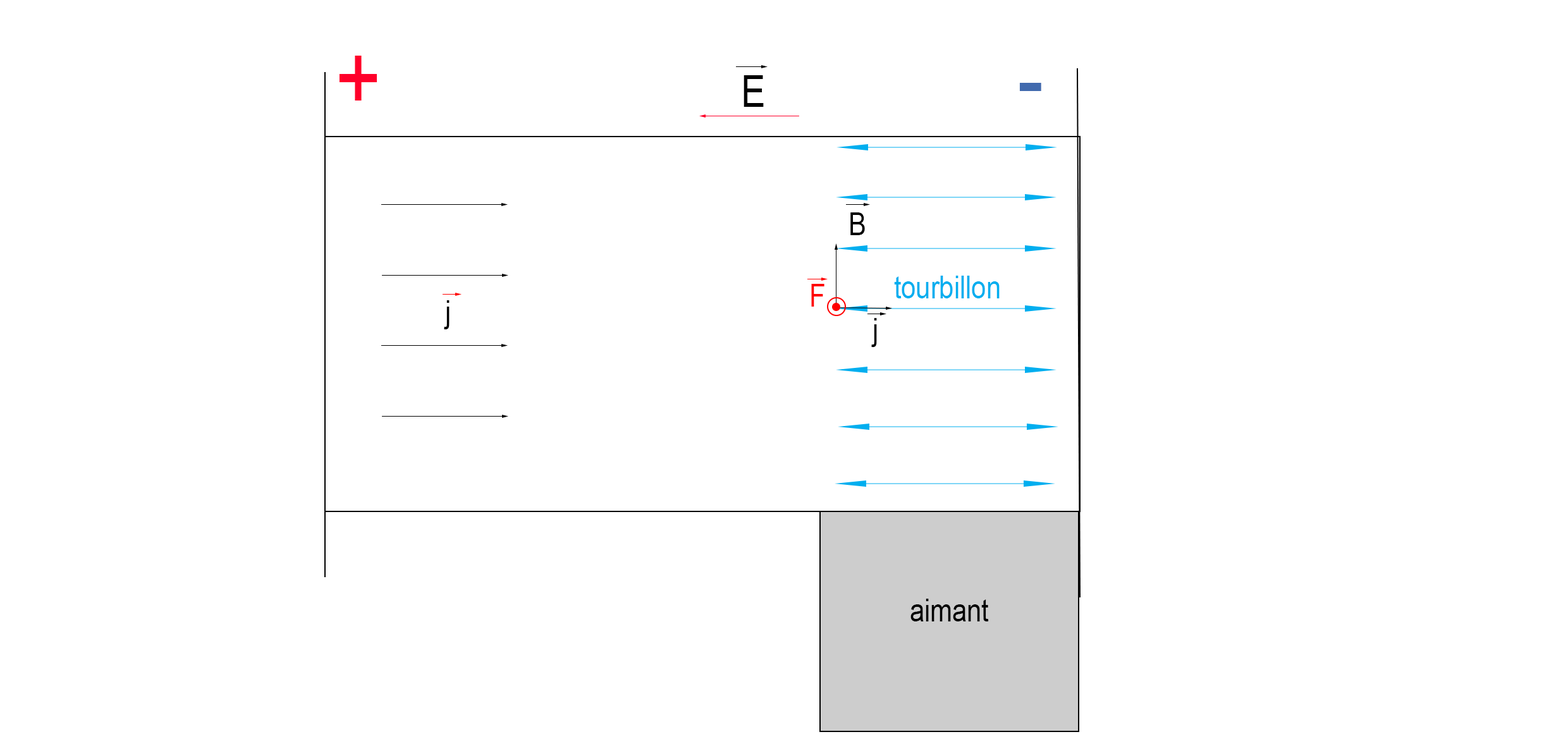
<style>
.page{position:relative;width:1568px;height:739px;background:#ffffff}
.page>*{position:absolute;margin:0}
.t1{font:94.8px "ArialMT";color:#ff002a;scale:0.83 1}
.t2{font:44.3px "ArialMT";color:#000000;scale:0.83 1}
.t3{font:94.8px "ArialMT";color:#416aae;scale:0.83 1}
.t4{font:31.6px "ArialMT";color:#000000;scale:0.83 1}
.t5{font:31.6px "ArialMT";color:#00aeef;scale:0.83 1}
.t6{font:31.6px "ArialMT";color:#ff0000;scale:0.83 1}
</style>
<div class="page">
<p class="t1" style="left:339px;top:56px;width:38px;height:45px">+</p>
<p class="t2" style="left:744px;top:75px;width:20px;height:32px">E</p>
<p class="t3" style="left:1019px;top:83px;width:22px;height:8px">-</p>
<p class="t4" style="left:850px;top:212px;width:15px;height:23px">B</p>
<p class="t5" style="left:894px;top:276px;width:106px;height:22px">tourbillon</p>
<p class="t6" style="left:811px;top:284px;width:13px;height:23px">F</p>
<p class="t4" style="left:444px;top:300px;width:6px;height:29px">j</p>
<p class="t4" style="left:871px;top:318px;width:6px;height:29px">j</p>
<p class="t4" style="left:910px;top:599px;width:79px;height:23px">aimant</p>
</div>
